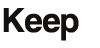
<style>
.page{position:relative;width:100px;height:48px;background:#ffffff}
.page>*{position:absolute;margin:0}
.t1{font:36px "CoolveticaRg-Regular";color:#131211}
</style>
<div class="page">
<p class="t1" style="left:3px;top:8px;width:76px;height:33px">Keep</p>
</div>
